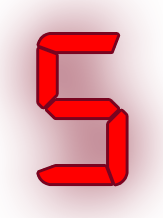
<style>
.page{position:relative;width:163px;height:218px}
.page>*{position:absolute;margin:0}
.t1{font:225.9px "Digital-7";color:#ff0000}
</style>
<div class="page">
<p class="t1" style="left:39px;top:35px;width:87px;height:149px">5</p>
</div>
